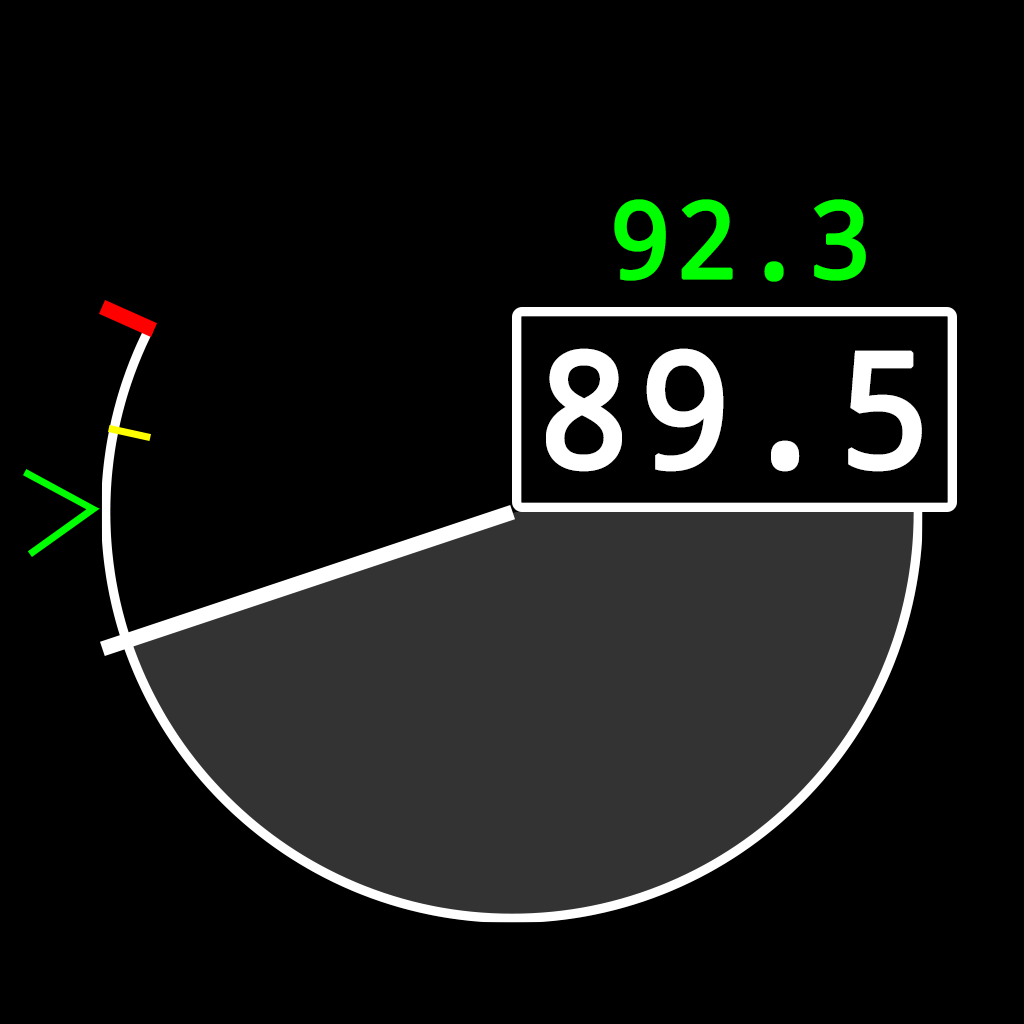
<style>
.page{position:relative;width:1024px;height:1024px;background:#000000}
.page>*{position:absolute;margin:0}
.t1{font:106.7px "DroidSansMono";color:#00ff00;font-weight:bold}
.t2{font:160px "DroidSansMono";color:#ffffff;font-weight:bold}
</style>
<div class="page">
<p class="t1" style="left:614px;top:199px;width:252px;height:83px">92.3</p>
<p class="t2" style="left:546px;top:348px;width:376px;height:124px">89.5</p>
</div>
